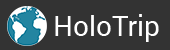
<style>
.page{position:relative;width:170px;height:50px;background:#333333}
.page>*{position:absolute;margin:0}
.t1{font:28.4px "Roboto-Regular";color:#ffffff}
</style>
<div class="page">
<p class="t1" style="left:55px;top:14px;width:104px;height:28px">HoloTrip</p>
</div>
